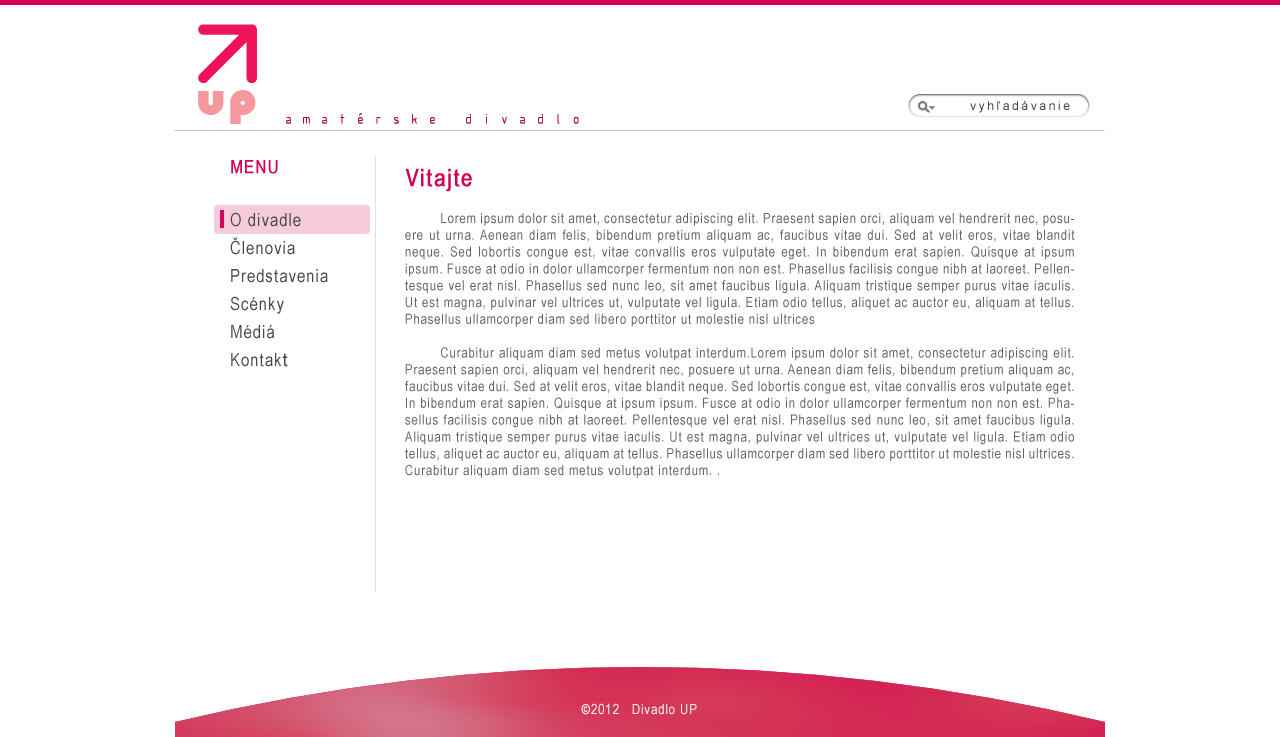
<style>
.page{position:relative;width:1280px;height:737px;background:#ffffff}
.page>*{position:absolute;margin:0}
.t1{font:42.4px "KnuckleDown";letter-spacing:0.1em;color:#f5989d;text-transform:uppercase}
.t2{font:12px "ArialMT";letter-spacing:0.22em;color:#464646}
.t3{font:12px "ISOCT3";letter-spacing:0.68em;color:#af0147;font-weight:bold}
.t4{font:18px/28px "ArialNarrow";letter-spacing:0.06em;color:#464646}
.t5{font:18px/25px "ArialNarrow";letter-spacing:0.06em;color:#d40055;font-weight:bold}
.t6{font:18px/28px "ArialMT";letter-spacing:0.06em;color:#464646}
.t7{font:24px "ArialNarrow";letter-spacing:0.06em;color:#d40055;font-weight:bold}
.t8{font:14px "ArialNarrow";letter-spacing:0.06em;color:#636363}
.t9{font:14px "ArialNarrow";letter-spacing:0.06em;color:#ffffff}
</style>
<div class="page">
<p class="t1" style="left:198px;top:90px;width:58px;height:34px">UP</p>
<p class="t2" style="left:970px;top:101px;width:100px;height:12px">vyhľadávanie</p>
<p class="t3" style="left:286px;top:113px;width:293px;height:11px">amatérske divadlo</p>
<p class="t4" style="left:230px;top:160px;width:98px;height:207px"><span class="t5">MENU<br><br></span>O divadle<br>Členovia<br>Predstavenia<br>Scénky<br>Médiá<br>Kontak<span class="t6">t</span></p>
<p class="t7" style="left:405px;top:168px;width:67px;height:24px">Vitajte</p>
<p class="t8" style="left:405px;top:213px;width:670px;height:265px;text-align:justify">Lorem ipsum dolor sit amet, consectetur adipiscing elit. Praesent sapien orci, aliquam vel hendrerit nec, posuere ut urna. Aenean diam felis, bibendum pretium aliquam ac, faucibus vitae dui. Sed at velit eros, vitae blandit neque. Sed lobortis congue est, vitae convallis eros vulputate eget. In bibendum erat sapien. Quisque at ipsum ipsum. Fusce at odio in dolor ullamcorper fermentum non non est. Phasellus facilisis congue nibh at laoreet. Pellentesque vel erat nisl. Phasellus sed nunc leo, sit amet faucibus ligula. Aliquam tristique semper purus vitae iaculis. Ut est magna, pulvinar vel ultrices ut, vulputate vel ligula. Etiam odio tellus, aliquet ac auctor eu, aliquam at tellus. Phasellus ullamcorper diam sed libero porttitor ut molestie nisl ultrices                      <br> <br> Curabitur aliquam diam sed metus volutpat interdum.Lorem ipsum dolor sit amet, consectetur adipiscing elit. Praesent sapien orci, aliquam vel hendrerit nec, posuere ut urna. Aenean diam felis, bibendum pretium aliquam ac, faucibus vitae dui. Sed at velit eros, vitae blandit neque. Sed lobortis congue est, vitae convallis eros vulputate eget. In bibendum erat sapien. Quisque at ipsum ipsum. Fusce at odio in dolor ullamcorper fermentum non non est. Phasellus facilisis congue nibh at laoreet. Pellentesque vel erat nisl. Phasellus sed nunc leo, sit amet faucibus ligula. Aliquam tristique semper purus vitae iaculis. Ut est magna, pulvinar vel ultrices ut, vulputate vel ligula. Etiam odio tellus, aliquet ac auctor eu, aliquam at tellus. Phasellus ullamcorper diam sed libero porttitor ut molestie nisl ultrices. Curabitur aliquam diam sed metus volutpat interdum. .</p>
<p class="t9" style="left:581px;top:703px;width:116px;height:12px">©2012   Divadlo UP</p>
</div>
